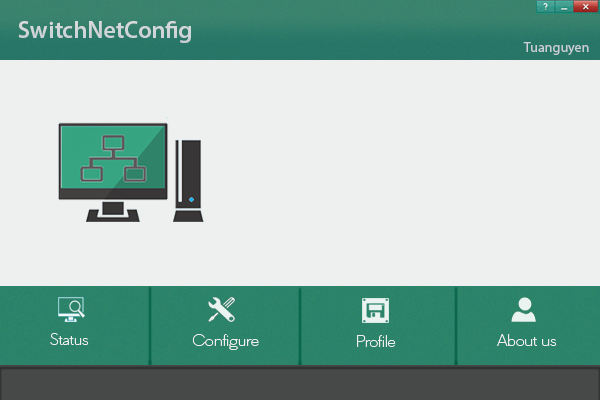
<style>
.page{position:relative;width:600px;height:400px;background:#eeefef}
.page>*{position:absolute;margin:0}
.t1{font:24px "MyriadPro-Semibold";color:#cfd5d9}
.t2{font:14px "MyriadPro-Regular";color:#c9cfd6}
.t3{font:18px "HiltonSans";color:#eeefef}
</style>
<div class="page">
<p class="t1" style="left:18px;top:21px;width:173px;height:22px">SwitchNetConfig</p>
<p class="t2" style="left:523px;top:42px;width:66px;height:13px">Tuanguyen</p>
<p class="t3" style="left:50px;top:333px;width:39px;height:12px">Status</p>
<p class="t3" style="left:192px;top:334px;width:67px;height:16px">Configure</p>
<p class="t3" style="left:357px;top:335px;width:39px;height:12px">Profile</p>
<p class="t3" style="left:497px;top:334px;width:60px;height:12px">About us</p>
</div>
